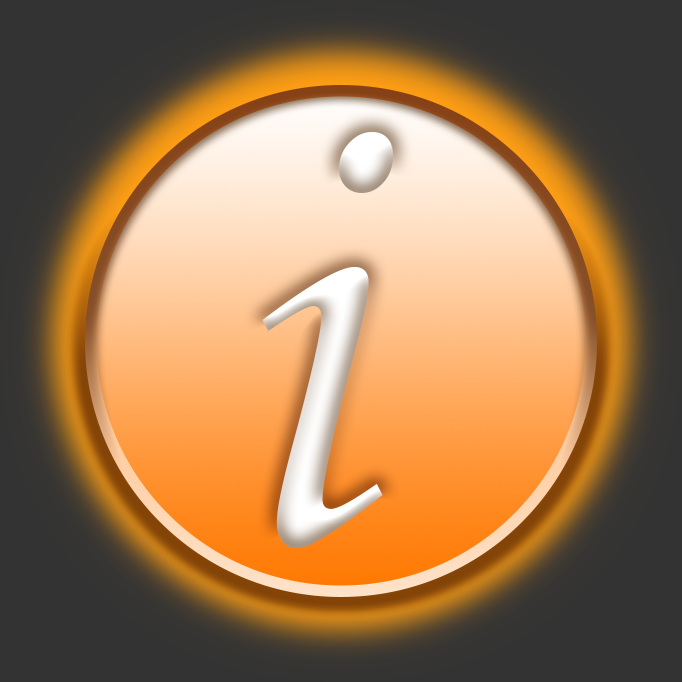
<style>
.page{position:relative;width:682px;height:682px}
.page>*{position:absolute;margin:0}
.t1{font:577.2px "BookAntiqua-Italic";letter-spacing:0.075em}
</style>
<div class="page">
<p class="t1" style="left:262px;top:132px;width:132px;height:416px">i</p>
</div>
